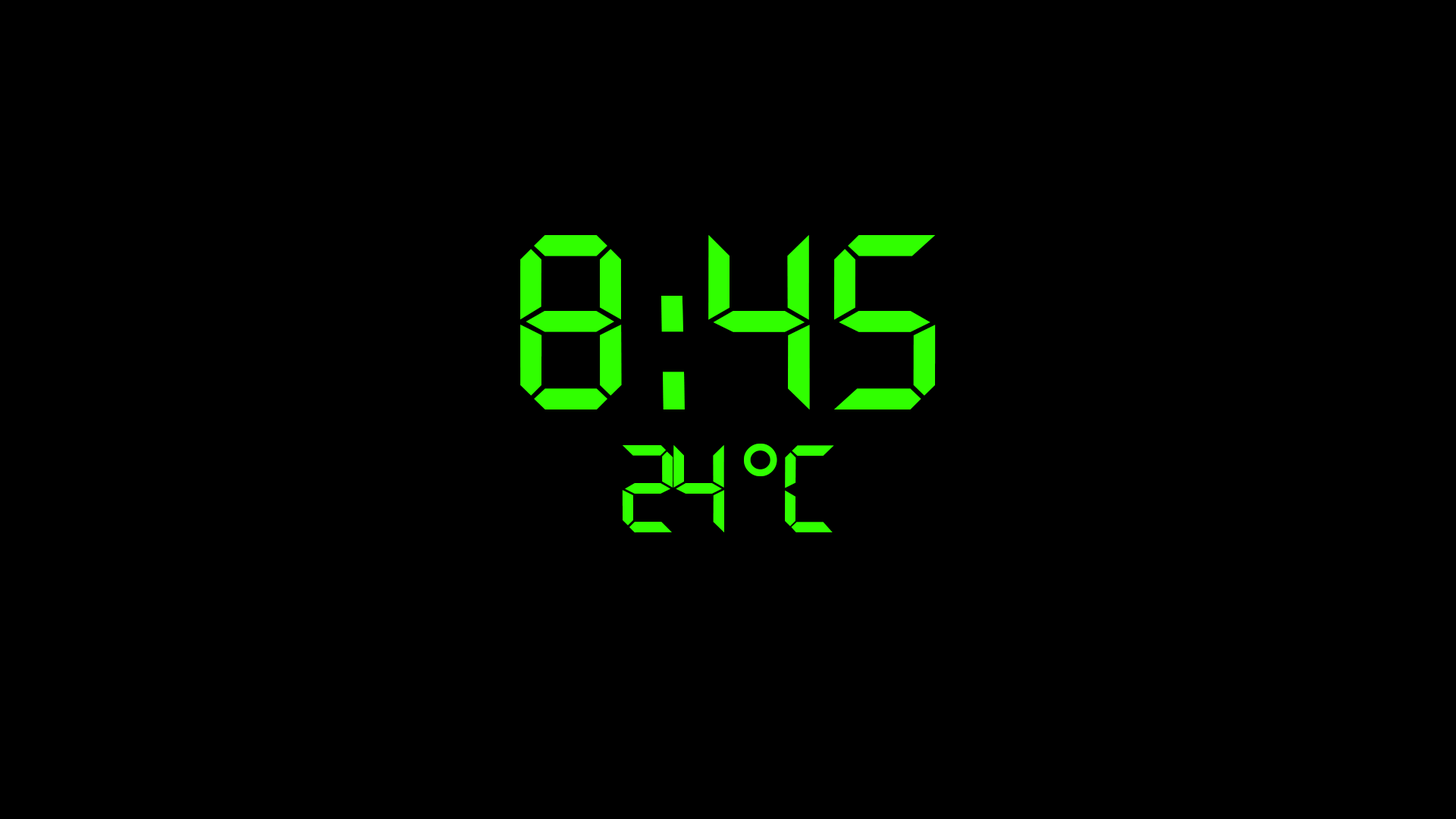
<style>
.page{position:relative;width:1456px;height:819px;background:#000000}
.page>*{position:absolute;margin:0}
.t1{font:242.7px "Digital";color:#30ff00}
.t2{font:121.3px "Digital";color:#30ff00}
.t3{font:121.3px "ArialMT";color:#30ff00}
</style>
<div class="page">
<p class="t1" style="left:520px;top:235px;width:416px;height:174px">8:45</p>
<p class="t2" style="left:622px;top:444px;width:212px;height:89px">24<span class="t3">°</span>C</p>
</div>
